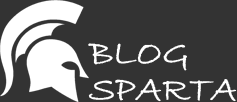
<style>
.page{position:relative;width:237px;height:102px;background:#333333}
.page>*{position:absolute;margin:0}
.t1{font:36px/36px "BradleyHandITC";color:#ffffff;font-weight:bold}
</style>
<div class="page">
<p class="t1" style="left:88px;top:43px;width:149px;height:59px;text-align:right">BLOG<br>SPARTA</p>
</div>
